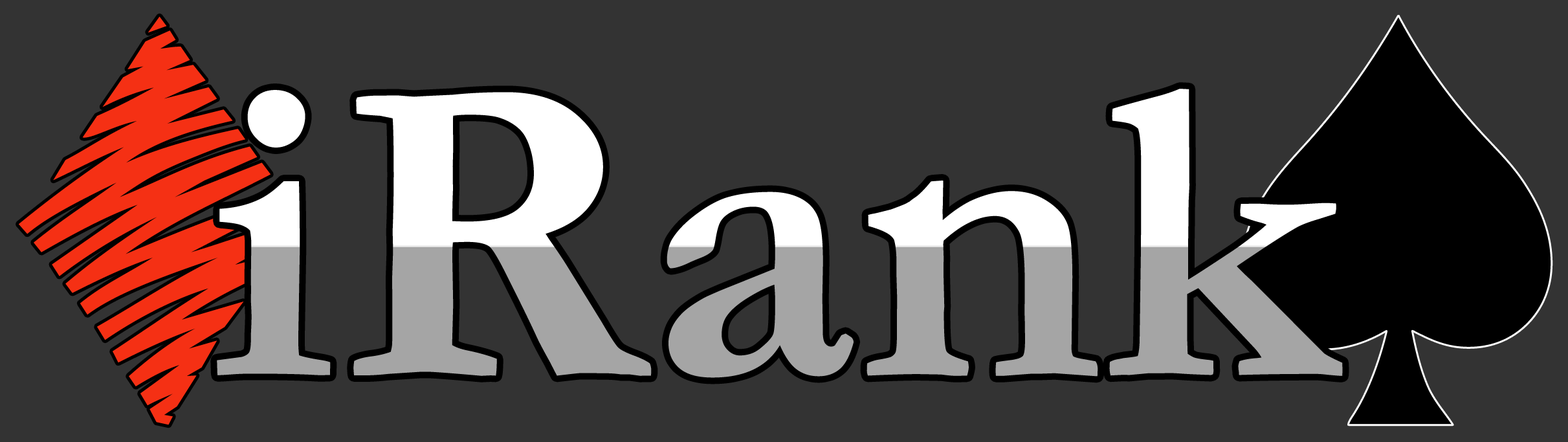
<style>
.page{position:relative;width:1568px;height:442px;background:#333333}
.page>*{position:absolute;margin:0}
.t1{font:442.3px "Garamond-Bold";letter-spacing:-0.025em;font-weight:bold}
</style>
<div class="page">
<p class="t1" style="left:217px;top:89px;width:1126px;height:289px">iRank</p>
</div>
